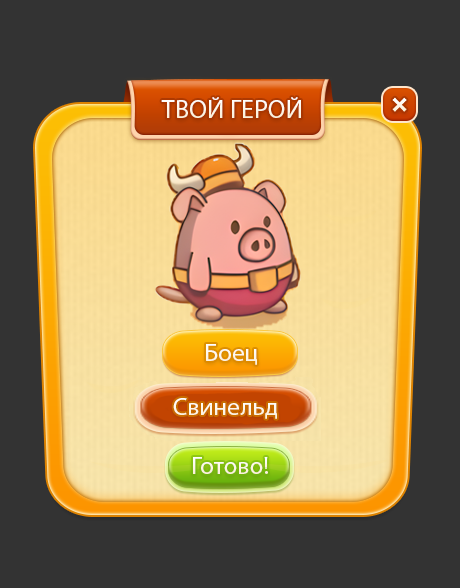
<style>
.page{position:relative;width:460px;height:588px;background:#333333}
.page>*{position:absolute;margin:0}
.t1{font:26px "MyriadPro-Regular";color:#ffffff}
.t2{font:25px "MyriadPro-Regular";color:#ffffff}
.t3{font:25px "MyriadPro-Regular";color:#fdf6e8}
</style>
<div class="page">
<p class="t1" style="left:161px;top:97px;width:140px;height:21px">ТВОЙ ГЕРОЙ</p>
<p class="t2" style="left:206px;top:344px;width:51px;height:21px">Боец</p>
<p class="t2" style="left:173px;top:398px;width:104px;height:21px">Свинельд</p>
<p class="t3" style="left:193px;top:457px;width:75px;height:17px">Готово!</p>
</div>
